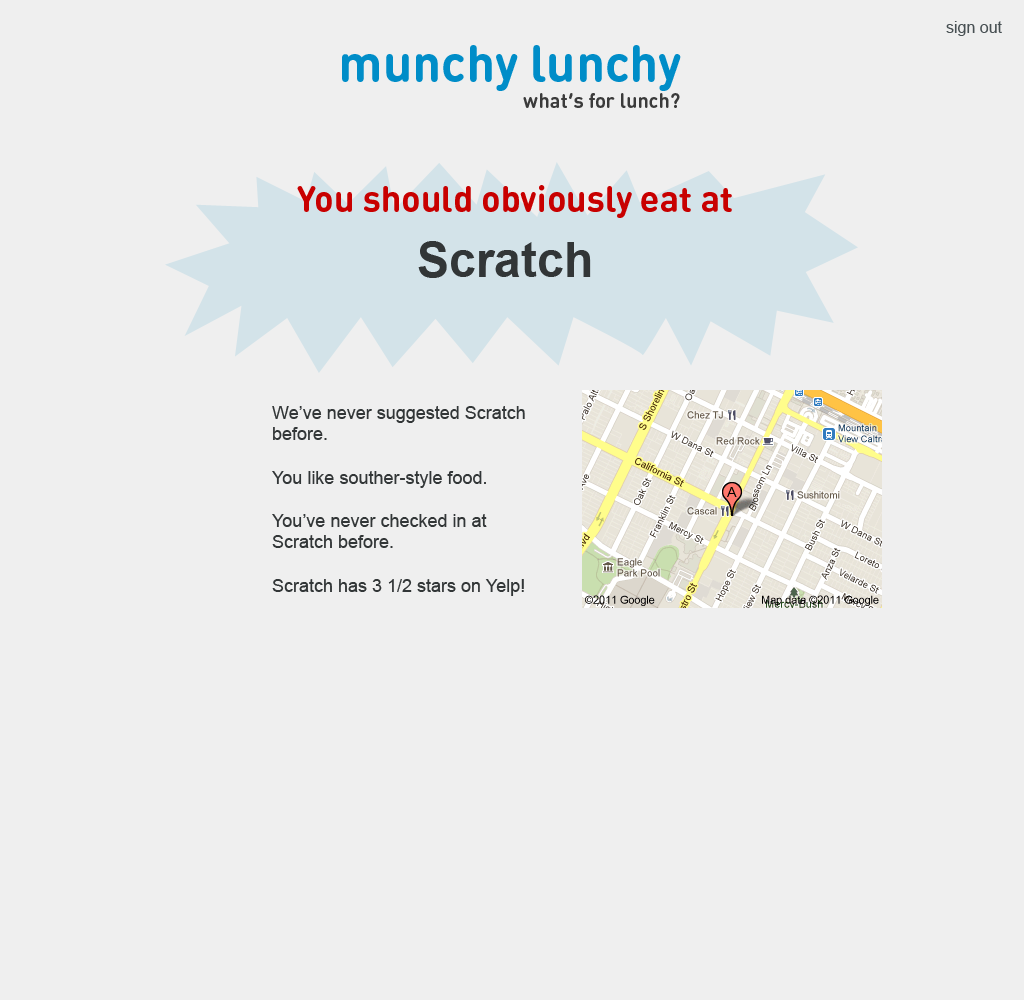
<style>
.page{position:relative;width:1024px;height:1000px;background:#efefef}
.page>*{position:absolute;margin:0}
.t1{font:16px "ArialMT";color:#485053}
.t2{font:51px "DINRoundOT-Bold";color:#008dc8}
.t3{font:20px "DINRoundOT-Bold";color:#3b3b3b}
.t4{font:36px "DINRoundOT-Bold";color:#c80000}
.t5{font:48px "Arial-BoldMT";color:#323637}
.t6{font:18px "ArialMT";color:#323637}
</style>
<div class="page">
<p class="t1" style="left:946px;top:21px;width:56px;height:15px">sign out</p>
<p class="t2" style="left:342px;top:45px;width:339px;height:46px">munchy lunchy</p>
<p class="t3" style="left:523px;top:93px;width:157px;height:15px">what’s for lunch?</p>
<p class="t4" style="left:297px;top:185px;width:435px;height:33px">You should obviously eat at</p>
<p class="t5" style="left:418px;top:241px;width:173px;height:37px">Scratch</p>
<p class="t6" style="left:272px;top:406px;width:253px;height:190px">We’ve never suggested Scratch before.<br><br>You like souther-style food.<br><br>You’ve never checked in at Scratch before.<br><br>Scratch has 3 1/2 stars on Yelp!</p>
</div>
